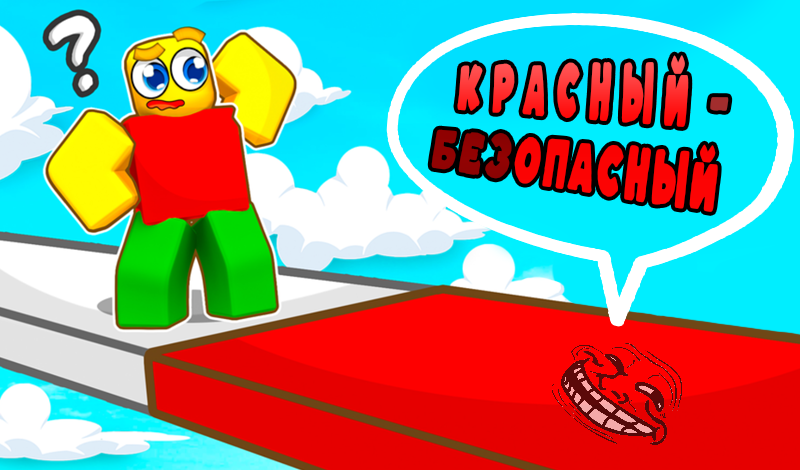
<style>
.page{position:relative;width:800px;height:470px}
.page>*{position:absolute;margin:0}
.t1{font:51.3px "Kaph-Italic";letter-spacing:0.34em;scale:0.55 1}
.t2{font:57.6px "Kaph-Italic";letter-spacing:0.08em;color:#ff0000;scale:0.53 1}
.t3{font:54.6px/41px "Kaph-Italic";letter-spacing:0.46em;color:#000000;scale:0.37 1}
.t4{font:56.1px/45px "Kaph-Italic";letter-spacing:0.34em;color:#373737;scale:0.49 1}
.t5{font:57.6px "Kaph-Italic";letter-spacing:0.08em;color:#000000;scale:0.53 1}
</style>
<div class="page">
<p class="t1" style="left:457px;top:55px;width:232px;height:72px;rotate:4deg">Красный</p>
<p class="t2" style="left:431px;top:97px;width:298px;height:115px;text-align:center;rotate:4deg"><span class="t3">            </span><span class="t4">—<br><br></span><span class="t5">без</span>опасный</p>
</div>
